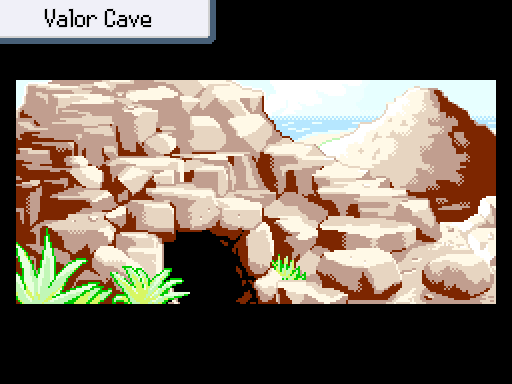
<style>
.page{position:relative;width:512px;height:384px;background:#000000}
.page>*{position:absolute;margin:0}
.t1{font:26px "PowerClear-Regular";color:#000000}
</style>
<div class="page">
<p class="t1" style="left:45px;top:9px;width:106px;height:18px">Valor Cave</p>
</div>
